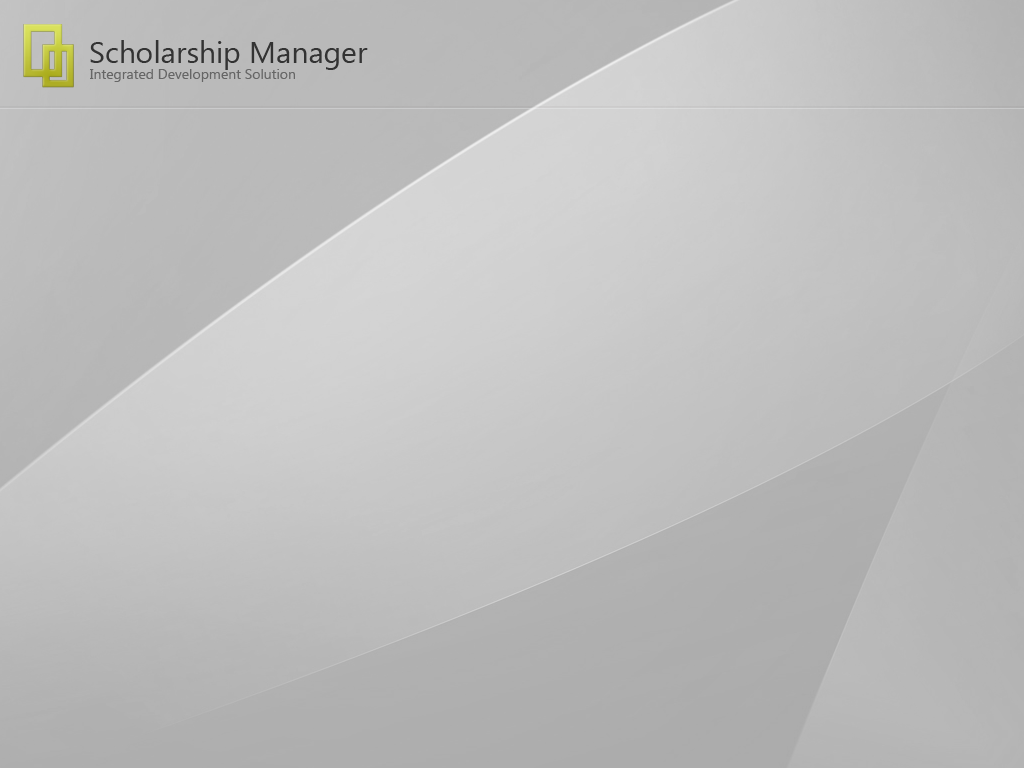
<style>
.page{position:relative;width:1024px;height:768px}
.page>*{position:absolute;margin:0}
.t1{font:30px "SegoeUI";color:#333333}
.t2{font:14px "SegoeUI";color:#666666}
</style>
<div class="page">
<p class="t1" style="left:90px;top:40px;width:278px;height:30px">Scholarship Manager</p>
<p class="t2" style="left:90px;top:69px;width:205px;height:13px">Integrated Development Solution</p>
</div>
